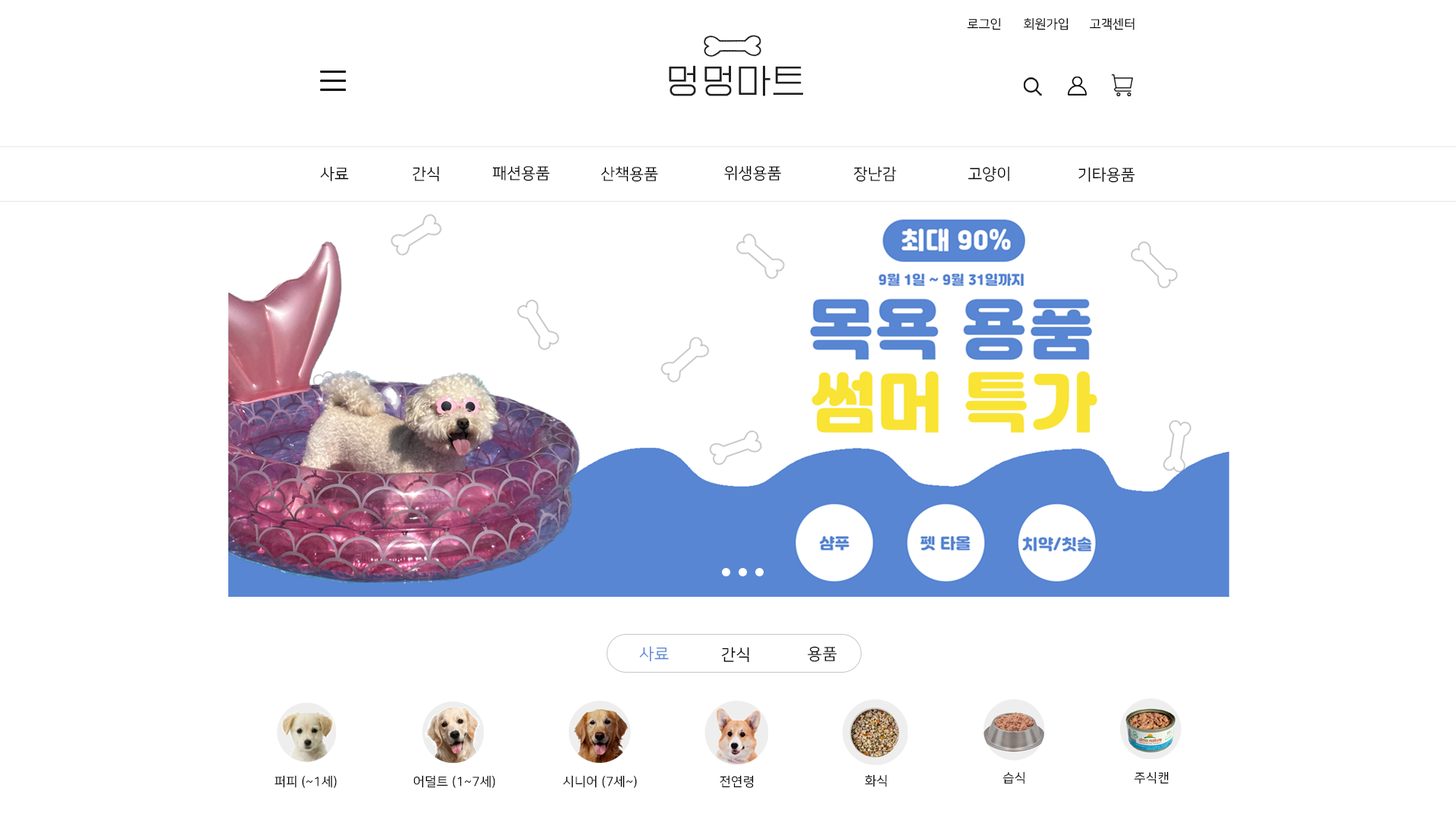
<style>
.page{position:relative;width:1456px;height:819px;background:#ffffff}
.page>*{position:absolute;margin:0}
.t1{font:12.6px "NanumSquareR";color:#000000}
.t2{font:34.8px "EF_watermelonSalad";letter-spacing:0.025em;color:#202020}
.t3{font:15.8px "NanumSquareR";color:#000000}
.t4{font:16.2px "NanumSquareR";letter-spacing:0.025em;color:#5886d3}
.t5{font:16.2px "NanumSquareR";letter-spacing:0.025em;color:#000000}
.t6{font:12.6px "NanumSquareR";letter-spacing:0.025em;color:#000000}
</style>
<div class="page">
<p class="t1" style="left:967px;top:17px;width:34px;height:13px">로그인</p>
<p class="t1" style="left:1024px;top:17px;width:44px;height:13px">회원가입</p>
<p class="t1" style="left:1090px;top:17px;width:44px;height:13px">고객센터</p>
<p class="t2" style="left:669px;top:65px;width:134px;height:31px">멍멍마트</p>
<p class="t3" style="left:320px;top:166px;width:29px;height:15px">사료</p>
<p class="t3" style="left:413px;top:166px;width:26px;height:16px">간식</p>
<p class="t3" style="left:492px;top:165px;width:58px;height:16px">패션용품</p>
<p class="t3" style="left:601px;top:166px;width:57px;height:16px">산책용품</p>
<p class="t3" style="left:724px;top:165px;width:57px;height:16px">위생용품</p>
<p class="t3" style="left:854px;top:166px;width:42px;height:16px">장난감</p>
<p class="t3" style="left:968px;top:166px;width:41px;height:16px">고양이</p>
<p class="t3" style="left:1078px;top:167px;width:57px;height:16px">기타용품</p>
<p class="t4" style="left:639px;top:646px;width:30px;height:16px">사료</p>
<p class="t5" style="left:721px;top:647px;width:28px;height:16px">간식</p>
<p class="t5" style="left:808px;top:646px;width:29px;height:16px">용품</p>
<p class="t6" style="left:1003px;top:771px;width:21px;height:13px">습식</p>
<p class="t6" style="left:1134px;top:771px;width:35px;height:13px">주식캔</p>
<p class="t6" style="left:275px;top:775px;width:62px;height:13px">퍼피 (~1세)</p>
<p class="t6" style="left:413px;top:775px;width:82px;height:13px">어덜트 (1~7세)</p>
<p class="t6" style="left:563px;top:775px;width:74px;height:13px">시니어 (7세~)</p>
<p class="t6" style="left:720px;top:775px;width:34px;height:13px">전연령</p>
<p class="t6" style="left:864px;top:774px;width:22px;height:13px">화식</p>
</div>
